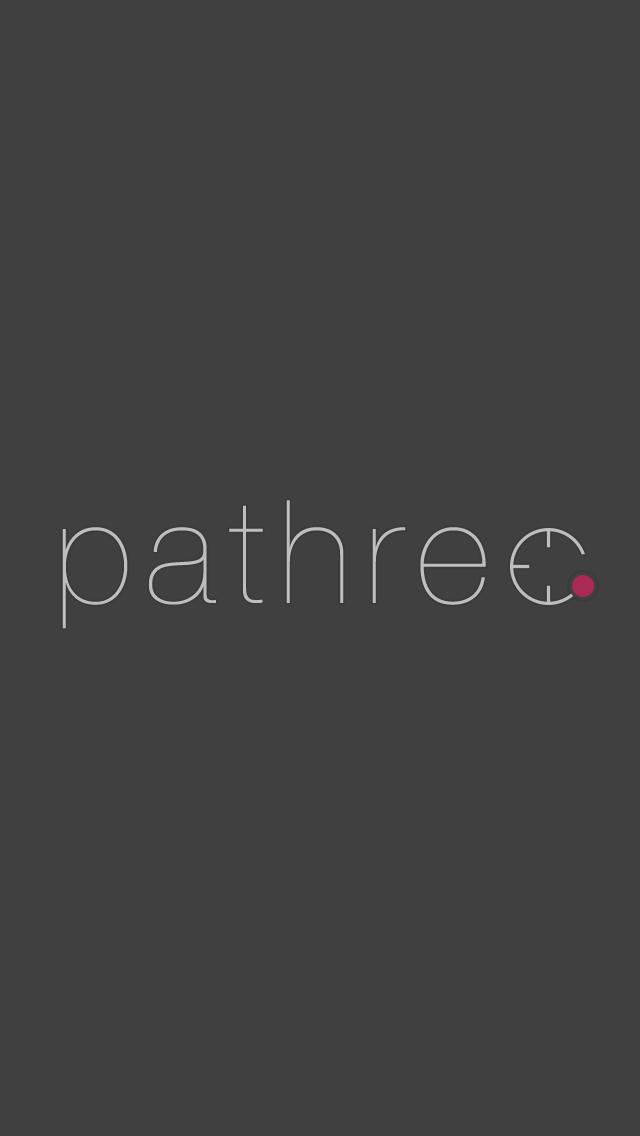
<style>
.page{position:relative;width:640px;height:1136px;background:#404040}
.page>*{position:absolute;margin:0}
.t1{font:144px "HelveticaNeue-UltraLight";letter-spacing:0.1em;color:#bebebe}
</style>
<div class="page">
<p class="t1" style="left:62px;top:500px;width:424px;height:129px">pathre</p>
</div>
